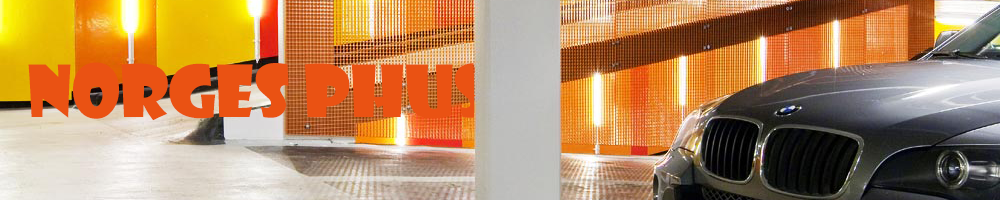
<style>
.page{position:relative;width:1000px;height:200px}
.page>*{position:absolute;margin:0}
.t1{font:70px "ShowcardGothic-Reg";color:#ea5213}
</style>
<div class="page">
<p class="t1" style="left:28px;top:62px;width:460px;height:59px">Norges Phus</p>
</div>
